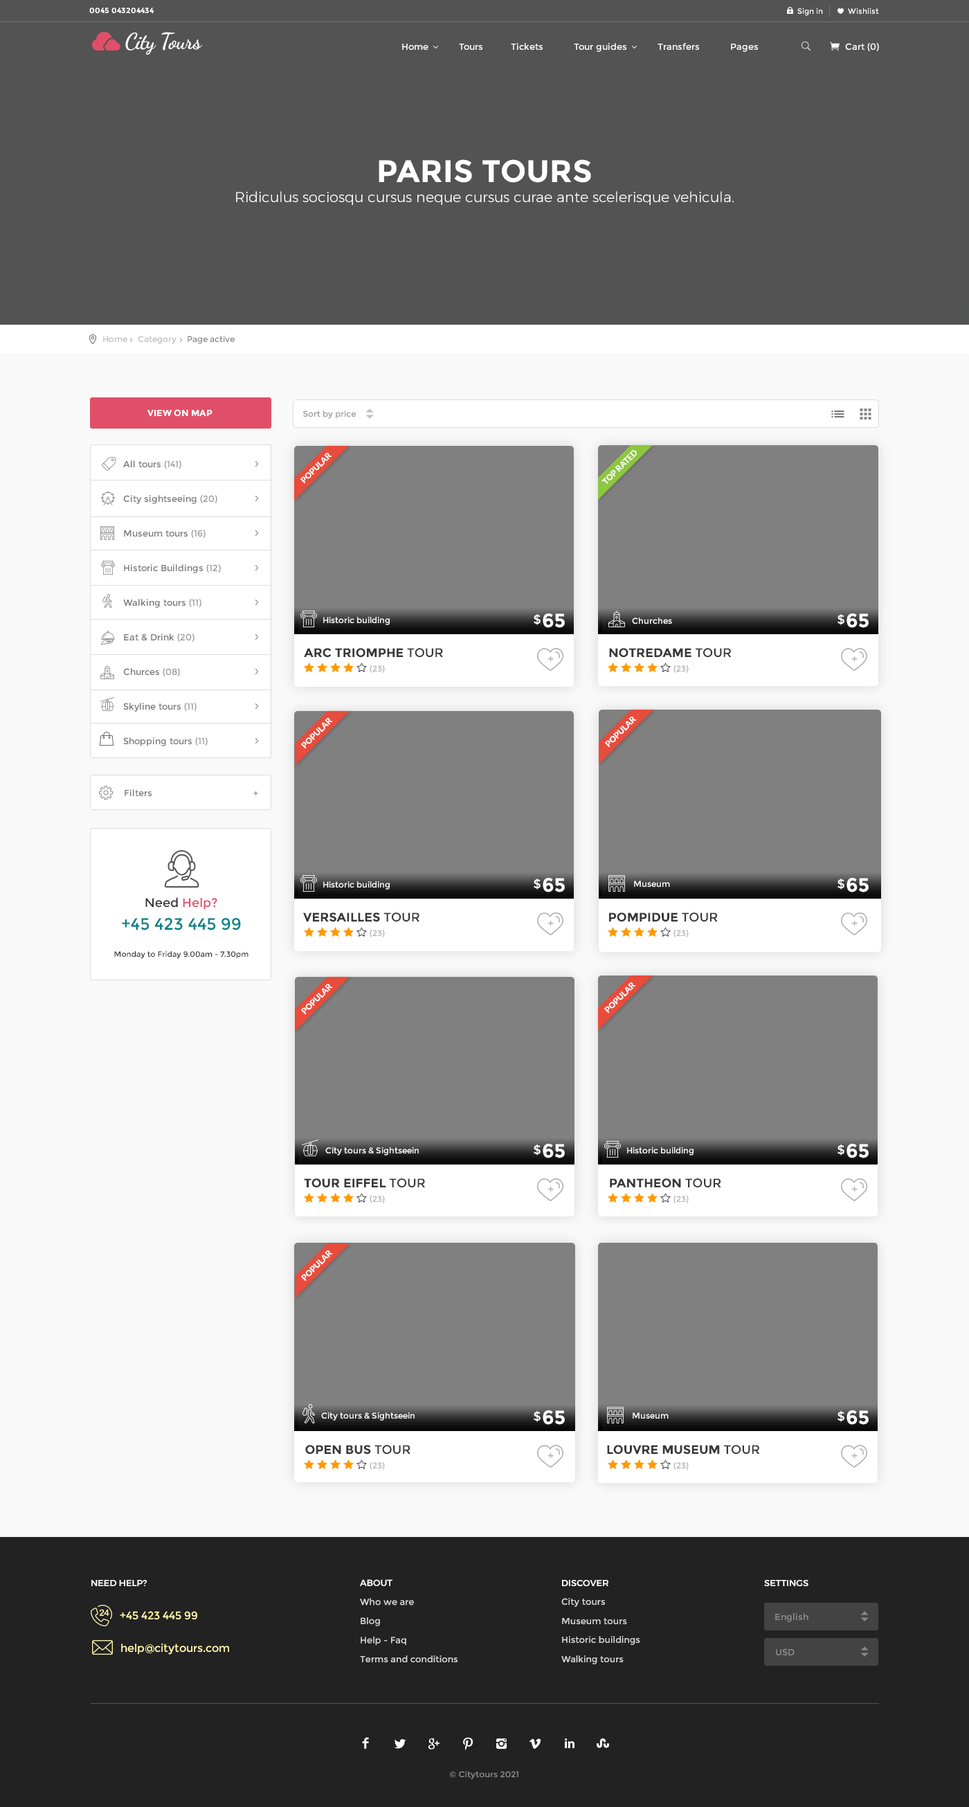
<style>
.page{position:relative;width:969px;height:1807px;background:#f9f9f9}
.page>*{position:absolute;margin:0}
.t1{font:7.6px "Montserrat-Bold";color:#ffffff}
.t2{font:7.6px "Montserrat-Regular";color:#ffffff}
.t3{font:22.2px "DancingScript-Bold";letter-spacing:-0.025em;color:#ffffff}
.t4{font:9px "Montserrat-Regular";color:#ffffff}
.t5{font:31.2px "Montserrat-Bold";color:#ffffff}
.t6{font:14.5px "Montserrat-Light";color:#ffffff}
.t7{font:8.3px "Montserrat-Regular";color:#bebebe}
.t8{font:8.3px "Montserrat-Regular";color:#888888}
.t9{font:9px "Montserrat-Bold";color:#ffffff;text-transform:uppercase}
.t10{font:8.3px "Montserrat-Regular";color:#999999}
.t11{font:9px/34.6px "Montserrat-Regular";color:#777777}
.t12{font:9px/34.6px "Montserrat-Regular";color:#999999}
.t13{font:8.3px "Lato-Black";color:#ffffff;text-transform:uppercase}
.t14{font:8.3px "Montserrat-Regular";color:#ffffff}
.t15{font:12.5px "Montserrat-Regular";color:#ffffff;text-transform:uppercase}
.t16{font:19.4px "Montserrat-Bold";color:#ffffff;text-transform:uppercase}
.t17{font:12.5px "Montserrat-Bold";color:#383838;text-transform:uppercase}
.t18{font:12.5px "Montserrat-Regular";color:#383838;text-transform:uppercase}
.t19{font:8.3px "Montserrat-Regular";color:#b2b2b2;text-transform:uppercase}
.t20{font:11.4px "Montserrat-Regular";color:#b2b2b2}
.t21{font:9px "Montserrat-Regular";color:#777777}
.t22{font:8.3px "Montserrat-Bold";color:#999999}
.t23{font:12.5px "Montserrat-Regular";color:#e04f67}
.t24{font:12.5px "Montserrat-Regular";color:#333333}
.t25{font:16.6px "Montserrat-Regular";color:#008489}
.t26{font:7.6px "Montserrat-Regular";color:#333333}
.t27{font:9px "Montserrat-Medium";color:#ffffff;text-transform:uppercase}
.t28{font:9px "Montserrat-Regular";color:#d8d8d8}
.t29{font:9px/8.3px "Montserrat-Medium";color:#ffffff;text-transform:uppercase}
.t30{font:11.1px "Montserrat-Regular";color:#fdf7ac}
.t31{font:9px "Montserrat-Regular";color:#8e8e8e}
.t32{font:8.2px "Montserrat-Regular";color:#8c8c8c;scale:1.04 1}
</style>
<div class="page">
<p class="t1" style="left:89px;top:8px;width:65px;height:5px">0045 043204434</p>
<p class="t2" style="left:798px;top:8px;width:81px;height:8px">Sign in            Wishlist</p>
<p class="t3" style="left:125px;top:32px;width:77px;height:23px">City Tours</p>
<p class="t4" style="left:402px;top:43px;width:356px;height:9px">Home           Tours          Tickets           Tour guides           Transfers           Pages</p>
<p class="t4" style="left:845px;top:43px;width:34px;height:8px">Cart (0)</p>
<p class="t5" style="left:379px;top:159px;width:212px;height:24px">PARIS TOURS</p>
<p class="t6" style="left:236px;top:191px;width:498px;height:14px">Ridiculus sociosqu cursus neque cursus curae ante scelerisque vehicula.</p>
<p class="t7" style="left:103px;top:336px;width:132px;height:8px">Home     Category     <span class="t8">Page active</span></p>
<p class="t9" style="left:147px;top:409px;width:66px;height:7px">VIEW ON MAP</p>
<p class="t10" style="left:303px;top:411px;width:54px;height:8px">Sort by price</p>
<p class="t11" style="left:123px;top:460px;width:98px;height:286px">All tours <span class="t12">(141)<br></span>City sightseeing <span class="t12">(20)<br></span>Museum tours <span class="t12">(16)<br></span>Historic Buildings <span class="t12">(12)<br></span>Walking tours <span class="t12">(11)<br></span>Eat &amp; Drink <span class="t12">(20)<br></span>Churces <span class="t12">(08)<br></span>Skyline tours <span class="t12">(11)<br></span>Shopping tours <span class="t12">(11)</span></p>
<p class="t13" style="left:300px;top:453px;width:32px;height:31px;rotate:-45deg">popular</p>
<p class="t13" style="left:602px;top:450px;width:35px;height:34px;rotate:-45deg">top rated</p>
<p class="t14" style="left:323px;top:617px;width:67px;height:8px">Historic building</p>
<p class="t15" style="left:534px;top:614px;width:7px;height:11px">$</p>
<p class="t16" style="left:543px;top:613px;width:22px;height:15px">65</p>
<p class="t14" style="left:632px;top:618px;width:40px;height:6px">Churches</p>
<p class="t15" style="left:838px;top:614px;width:7px;height:11px">$</p>
<p class="t16" style="left:847px;top:613px;width:22px;height:15px">65</p>
<p class="t17" style="left:304px;top:648px;width:139px;height:10px">ARC TRIOMPHE <span class="t18">tour</span></p>
<p class="t17" style="left:609px;top:648px;width:123px;height:10px">NOTREDAME <span class="t18">tour</span></p>
<p class="t19" style="left:370px;top:665px;width:15px;height:8px">(23)</p>
<p class="t20" style="left:548px;top:656px;width:6px;height:6px">+</p>
<p class="t19" style="left:674px;top:665px;width:15px;height:8px">(23)</p>
<p class="t20" style="left:852px;top:656px;width:6px;height:6px">+</p>
<p class="t13" style="left:301px;top:718px;width:32px;height:31px;rotate:-45deg">popular</p>
<p class="t13" style="left:605px;top:717px;width:32px;height:31px;rotate:-45deg">popular</p>
<p class="t21" style="left:125px;top:789px;width:27px;height:7px">Filters</p>
<p class="t22" style="left:253px;top:791px;width:5px;height:4px">+</p>
<p class="t14" style="left:323px;top:881px;width:67px;height:9px">Historic building</p>
<p class="t15" style="left:534px;top:879px;width:7px;height:11px">$</p>
<p class="t16" style="left:543px;top:878px;width:22px;height:14px">65</p>
<p class="t14" style="left:634px;top:881px;width:36px;height:6px">Museum</p>
<p class="t15" style="left:838px;top:879px;width:7px;height:11px">$</p>
<p class="t16" style="left:847px;top:878px;width:22px;height:14px">65</p>
<p class="t23" style="left:145px;top:897px;width:72px;height:13px"><span class="t24">Need </span>Help?</p>
<p class="t25" style="left:122px;top:917px;width:119px;height:13px">+45 423 445 99</p>
<p class="t17" style="left:303px;top:912px;width:117px;height:10px">VERSAILLES <span class="t18">tour</span></p>
<p class="t17" style="left:609px;top:912px;width:109px;height:10px">POMPIDUE <span class="t18">tour</span></p>
<p class="t19" style="left:370px;top:930px;width:15px;height:7px">(23)</p>
<p class="t20" style="left:548px;top:920px;width:6px;height:6px">+</p>
<p class="t19" style="left:674px;top:930px;width:15px;height:7px">(23)</p>
<p class="t20" style="left:852px;top:920px;width:6px;height:6px">+</p>
<p class="t26" style="left:114px;top:951px;width:135px;height:8px">Monday to Friday 9.00am - 7.30pm</p>
<p class="t13" style="left:301px;top:984px;width:32px;height:31px;rotate:-45deg">popular</p>
<p class="t13" style="left:604px;top:982px;width:32px;height:32px;rotate:-45deg">popular</p>
<p class="t15" style="left:534px;top:1144px;width:7px;height:11px">$</p>
<p class="t16" style="left:543px;top:1144px;width:22px;height:14px">65</p>
<p class="t15" style="left:838px;top:1144px;width:7px;height:11px">$</p>
<p class="t16" style="left:847px;top:1144px;width:22px;height:14px">65</p>
<p class="t14" style="left:325px;top:1147px;width:94px;height:8px">City tours &amp; Sightseein</p>
<p class="t14" style="left:627px;top:1147px;width:67px;height:8px">Historic building</p>
<p class="t17" style="left:304px;top:1178px;width:121px;height:10px">TOUR EIFFEL <span class="t18">tour</span></p>
<p class="t17" style="left:610px;top:1178px;width:111px;height:10px">PANTHEON <span class="t18">tour</span></p>
<p class="t20" style="left:548px;top:1186px;width:6px;height:6px">+</p>
<p class="t20" style="left:852px;top:1186px;width:6px;height:6px">+</p>
<p class="t19" style="left:370px;top:1196px;width:15px;height:7px">(23)</p>
<p class="t19" style="left:674px;top:1196px;width:15px;height:7px">(23)</p>
<p class="t13" style="left:301px;top:1250px;width:32px;height:31px;rotate:-45deg">popular</p>
<p class="t14" style="left:321px;top:1412px;width:94px;height:9px">City tours &amp; Sightseein</p>
<p class="t15" style="left:534px;top:1411px;width:7px;height:11px">$</p>
<p class="t16" style="left:543px;top:1410px;width:22px;height:15px">65</p>
<p class="t14" style="left:633px;top:1412px;width:36px;height:7px">Museum</p>
<p class="t15" style="left:838px;top:1411px;width:7px;height:11px">$</p>
<p class="t16" style="left:847px;top:1410px;width:22px;height:15px">65</p>
<p class="t17" style="left:305px;top:1445px;width:106px;height:10px">OPEN BUS <span class="t18">tour</span></p>
<p class="t17" style="left:607px;top:1445px;width:153px;height:10px">LOUVRE MUSEUM <span class="t18">tour</span></p>
<p class="t20" style="left:548px;top:1452px;width:6px;height:7px">+</p>
<p class="t20" style="left:852px;top:1452px;width:6px;height:7px">+</p>
<p class="t19" style="left:370px;top:1462px;width:15px;height:8px">(23)</p>
<p class="t19" style="left:674px;top:1462px;width:15px;height:8px">(23)</p>
<p class="t27" style="left:91px;top:1580px;width:56px;height:7px">Need help?</p>
<p class="t28" style="left:360px;top:1579px;width:98px;height:83px"><span class="t29">About<br></span>Who we are<br>Blog<br>Help - Faq<br>Terms and conditions</p>
<p class="t28" style="left:561px;top:1580px;width:79px;height:84px"><span class="t29">Discover<br></span>City tours<br>Museum tours<br>Historic buildings<br>Walking tours</p>
<p class="t27" style="left:764px;top:1580px;width:45px;height:7px">Settings</p>
<p class="t30" style="left:120px;top:1611px;width:77px;height:9px">+45 423 445 99</p>
<p class="t31" style="left:775px;top:1613px;width:34px;height:9px">English</p>
<p class="t30" style="left:121px;top:1643px;width:108px;height:12px">help@citytours.com</p>
<p class="t31" style="left:776px;top:1648px;width:19px;height:7px">USD</p>
<p class="t32" style="left:449px;top:1771px;width:70px;height:8px">© Citytours 2021</p>
</div>
